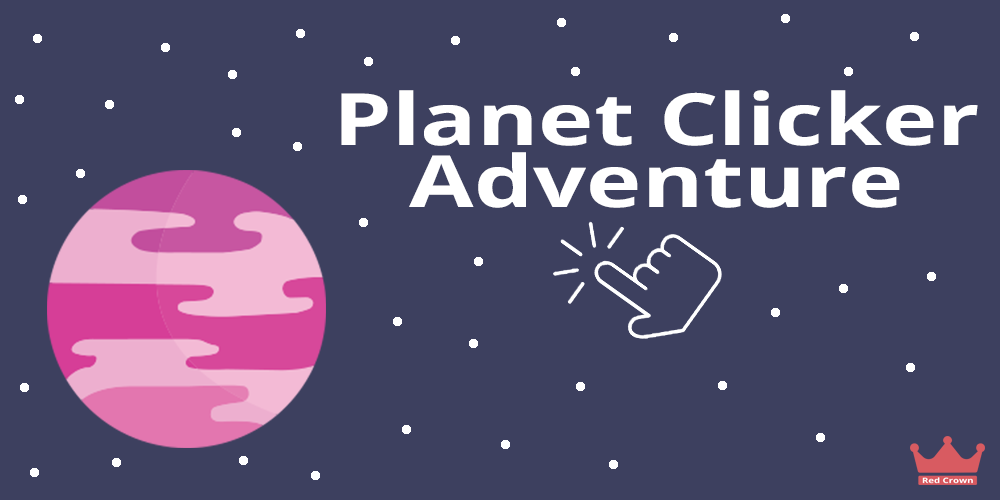
<style>
.page{position:relative;width:1000px;height:500px;background:#3d405f}
.page>*{position:absolute;margin:0}
.t1{font:72px/62px "OpenSans-Bold";color:#ffffff;scale:1.3 1}
</style>
<div class="page">
<p class="t1" style="left:341px;top:90px;width:637px;height:118px;text-align:center">Planet Clicker<br>Adventure</p>
</div>
